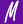
<style>
.page{position:relative;width:23px;height:24px;background:#670ea0}
.page>*{position:absolute;margin:0}
.t1{font:28px "FreestyleScript-Regular";color:#ffffff;scale:0.8 1}
</style>
<div class="page">
<p class="t1" style="left:4px;top:0px;width:15px;height:23px;rotate:-7deg">M</p>
</div>
